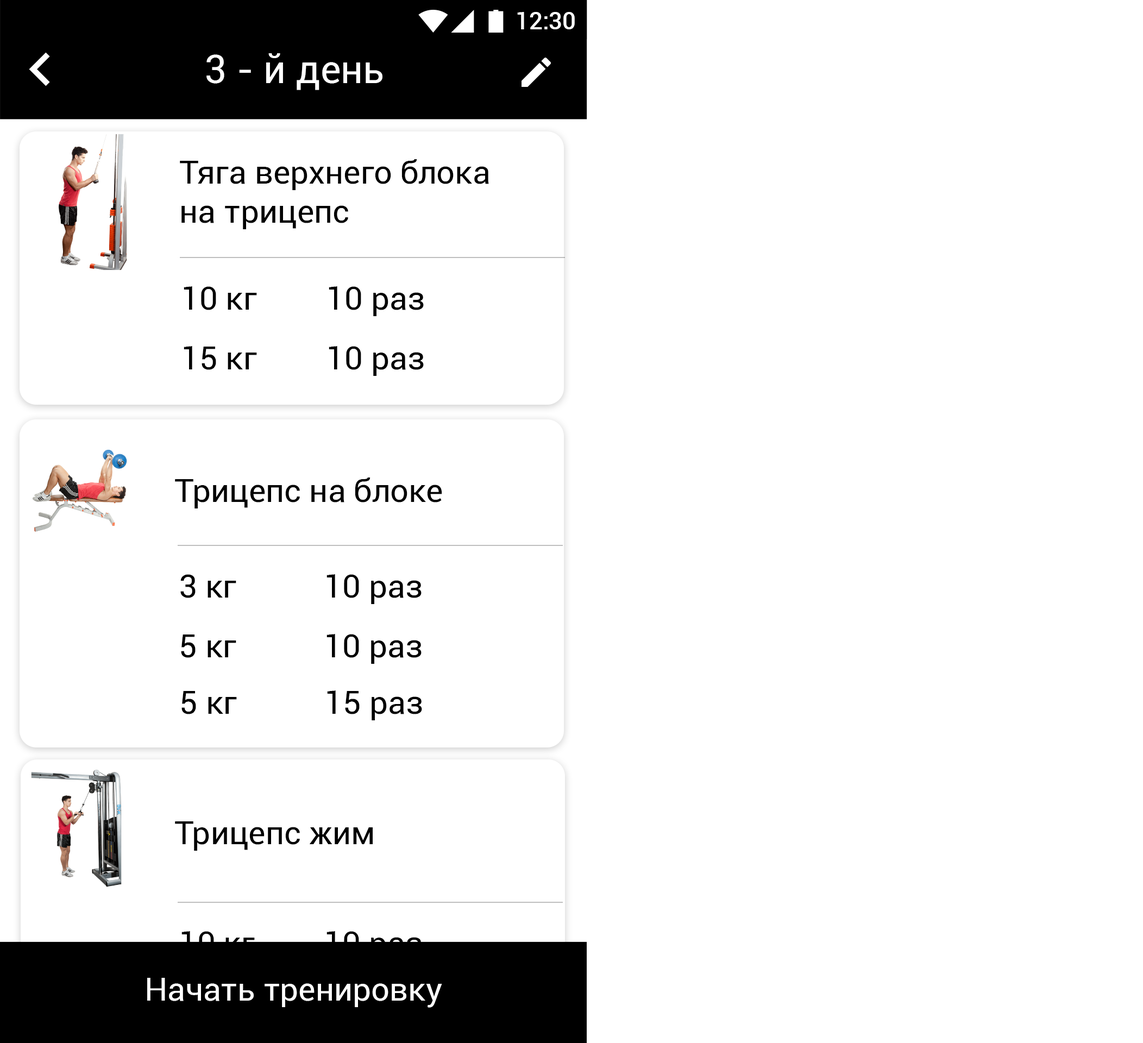
<style>
.page{position:relative;width:1143px;height:1043px;background:#ffffff}
.page>*{position:absolute;margin:0}
.t1{font:23.9px "Roboto-Medium";color:#ffffff}
.t2{font:39.1px "Roboto-Regular";color:#ffffff}
.t3{font:32.6px "Roboto-Regular";color:#000000}
.t4{font:32.6px "Roboto-Regular";color:#ffffff}
</style>
<div class="page">
<p class="t1" style="left:517px;top:12px;width:58px;height:17px">12:30</p>
<p class="t2" style="left:206px;top:53px;width:176px;height:37px">3 - й день</p>
<p class="t3" style="left:180px;top:159px;width:309px;height:70px">Тяга верхнего блока<br>на трицепс</p>
<p class="t3" style="left:184px;top:286px;width:73px;height:24px">10 кг</p>
<p class="t3" style="left:329px;top:286px;width:95px;height:30px">10 раз</p>
<p class="t3" style="left:184px;top:346px;width:73px;height:24px">15 кг</p>
<p class="t3" style="left:329px;top:346px;width:95px;height:30px">10 раз</p>
<p class="t3" style="left:175px;top:478px;width:267px;height:31px">Трицепс на блоке</p>
<p class="t3" style="left:180px;top:574px;width:56px;height:24px">3 кг</p>
<p class="t3" style="left:327px;top:574px;width:95px;height:30px">10 раз</p>
<p class="t3" style="left:181px;top:635px;width:55px;height:23px">5 кг</p>
<p class="t3" style="left:327px;top:634px;width:95px;height:30px">10 раз</p>
<p class="t3" style="left:181px;top:691px;width:56px;height:23px">5 кг</p>
<p class="t3" style="left:327px;top:691px;width:95px;height:29px">15 раз</p>
<p class="t3" style="left:175px;top:821px;width:198px;height:30px">Трицепс жим</p>
<p class="t3" style="left:181px;top:931px;width:74px;height:24px">10 кг</p>
<p class="t4" style="left:147px;top:978px;width:295px;height:30px">Начать тренировку</p>
</div>
